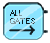
<style>
.page{position:relative;width:50px;height:43px;background:#ffffff}
.page>*{position:absolute;margin:0}
.t1{font:7.8px/7.8px "Small Fonts"}
</style>
<div class="page">
<p class="t1" style="left:10px;top:10px;width:25px;height:14px">ALL GATES</p>
</div>
